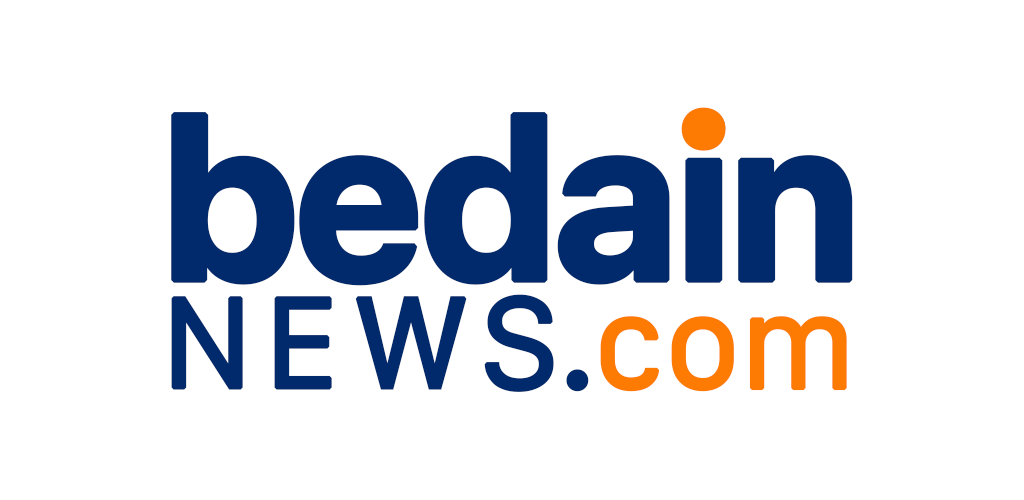
<style>
.page{position:relative;width:1024px;height:500px;background:#ffffff}
.page>*{position:absolute;margin:0}
.t1{font:222.5px "Galvji-Bold";letter-spacing:-0.05em;color:#012a6c;font-weight:bold}
.t2{font:222.5px "Galvji-Bold";letter-spacing:-0.05em;color:#fd7b03;font-weight:bold}
.t3{font:123.2px "Galvji";letter-spacing:0.1em;color:#012a6c;font-weight:bold}
.t4{font:123.2px "Galvji";color:#012a6c;font-weight:bold}
.t5{font:123.2px "Galvji";color:#fd7b03;font-weight:bold}
</style>
<div class="page">
<p class="t1" style="left:171px;top:109px;width:682px;height:177px">bedain</p>
<p class="t2" style="left:681px;top:107px;width:45px;height:44px">.</p>
<p class="t3" style="left:171px;top:294px;width:676px;height:98px">NEW<span class="t4">S.</span><span class="t5">com</span></p>
</div>
